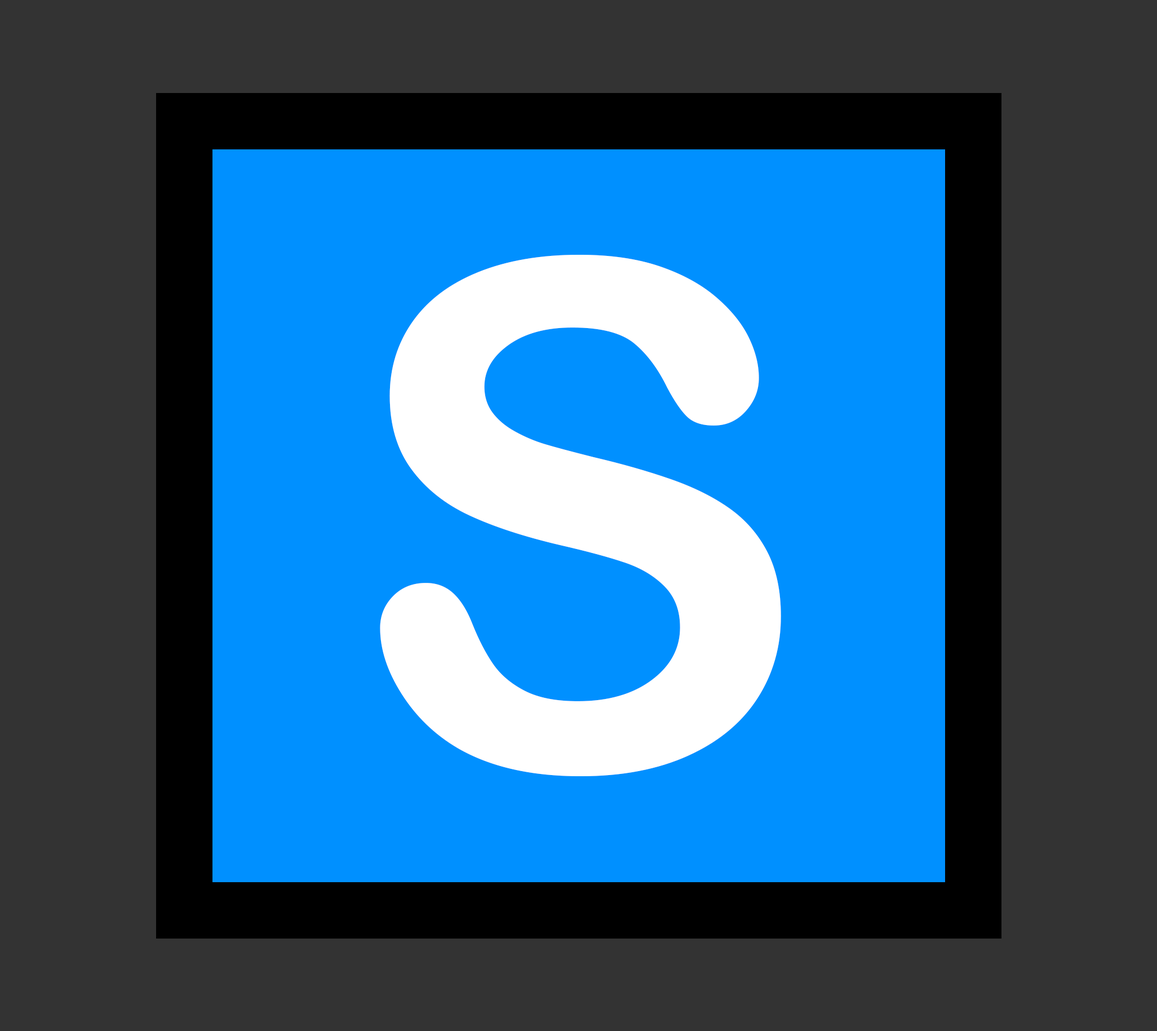
<style>
.page{position:relative;width:1157px;height:1031px;background:#333333}
.page>*{position:absolute;margin:0}
.t1{font:704.4px "ArialRoundedMTBold";color:#ffffff}
</style>
<div class="page">
<p class="t1" style="left:380px;top:255px;width:401px;height:521px">S</p>
</div>
